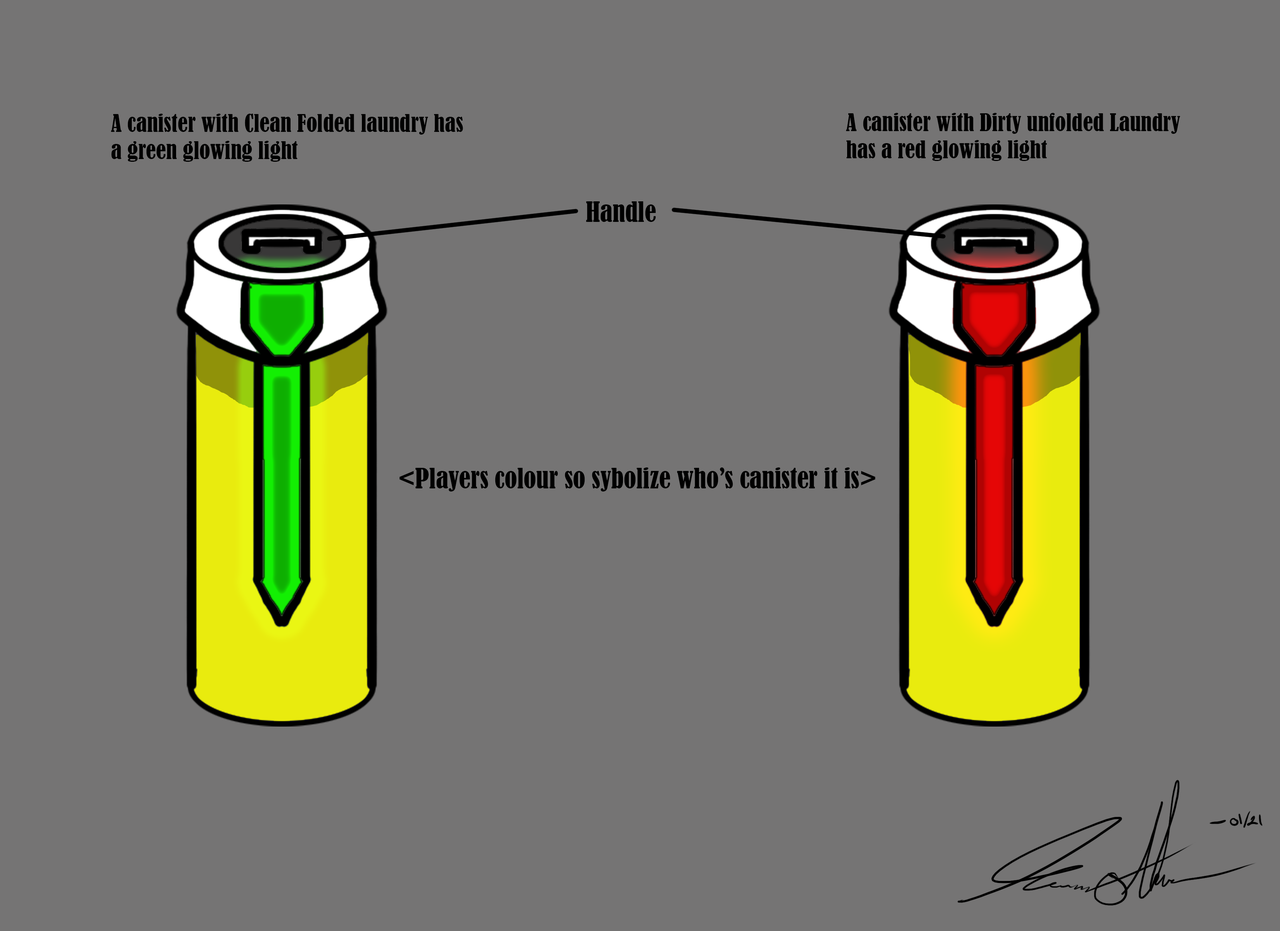
<style>
.page{position:relative;width:1280px;height:931px;background:#757474}
.page>*{position:absolute;margin:0}
.t1{font:22.6px "BernardMT-Condensed";color:#000000}
.t2{font:25.9px "BernardMT-Condensed";color:#000000}
</style>
<div class="page">
<p class="t1" style="left:111px;top:114px;width:352px;height:48px">A canister with Clean Folded laundry has a green glowing light</p>
<p class="t1" style="left:846px;top:113px;width:335px;height:48px">A canister with Dirty unfolded Laundry has a red glowing light</p>
<p class="t2" style="left:586px;top:201px;width:70px;height:21px">Handle</p>
<p class="t2" style="left:400px;top:468px;width:476px;height:24px">&lt;Players colour so sybolize who’s canister it is&gt;</p>
</div>
